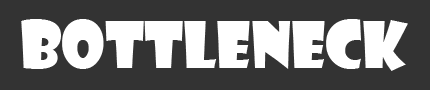
<style>
.page{position:relative;width:430px;height:90px;background:#333333}
.page>*{position:absolute;margin:0}
.t1{font:62.5px "ShowcardGothic-Reg";color:#ffffff}
</style>
<div class="page">
<p class="t1" style="left:21px;top:19px;width:387px;height:52px">bottleneck</p>
</div>
